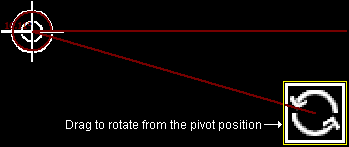
<style>
.page{position:relative;width:349px;height:147px;background:#000000}
.page>*{position:absolute;margin:0}
.t1{font:12px "ArialMT";color:#ffffff}
</style>
<div class="page">
<p class="t1" style="left:66px;top:120px;width:195px;height:11px">Drag to rotate from the pivot position</p>
</div>
